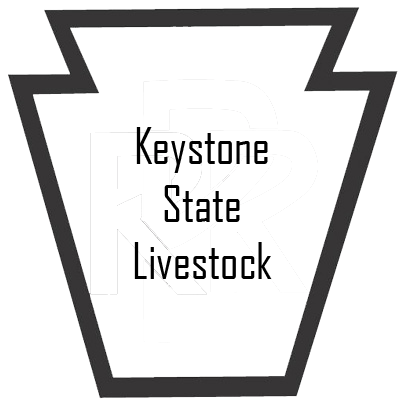
<style>
.page{position:relative;width:400px;height:404px;background:#ffffff}
.page>*{position:absolute;margin:0}
.t1{font:48px "AgencyFB-Reg";color:#000000}
</style>
<div class="page">
<p class="t1" style="left:134px;top:127px;width:138px;height:152px;text-align:center">Keystone<br> State <br>Livestock</p>
</div>
